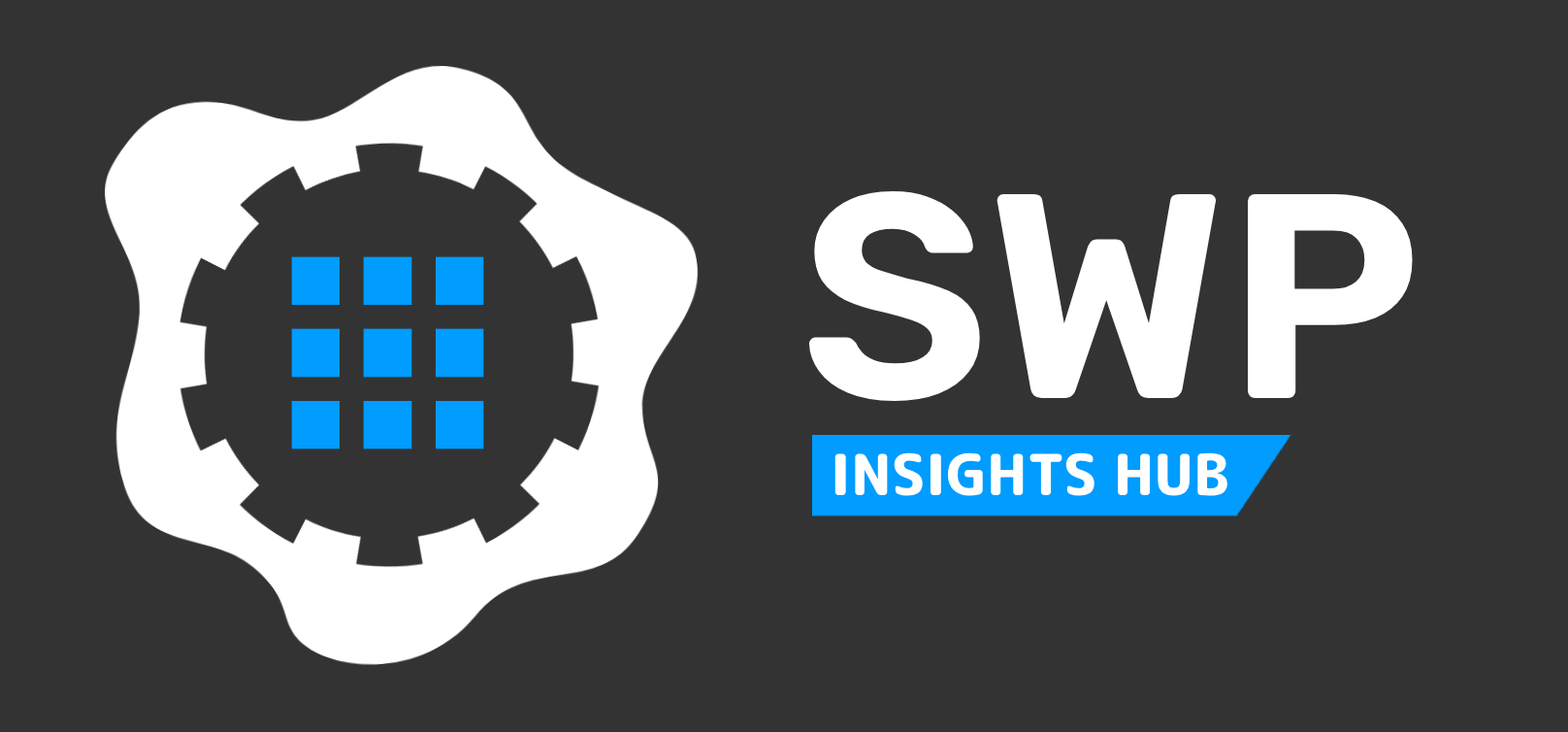
<style>
.page{position:relative;width:1568px;height:732px;background:#333333}
.page>*{position:absolute;margin:0}
.t1{font:291.1px "Rubik-SemiBold";color:#ffffff}
.t2{font:56.6px "RoundedMplus1c-ExtraBold";color:#ffffff}
</style>
<div class="page">
<p class="t1" style="left:808px;top:191px;width:605px;height:210px">SWP</p>
<p class="t2" style="left:834px;top:452px;width:393px;height:44px">INSIGHTS HUB</p>
</div>
